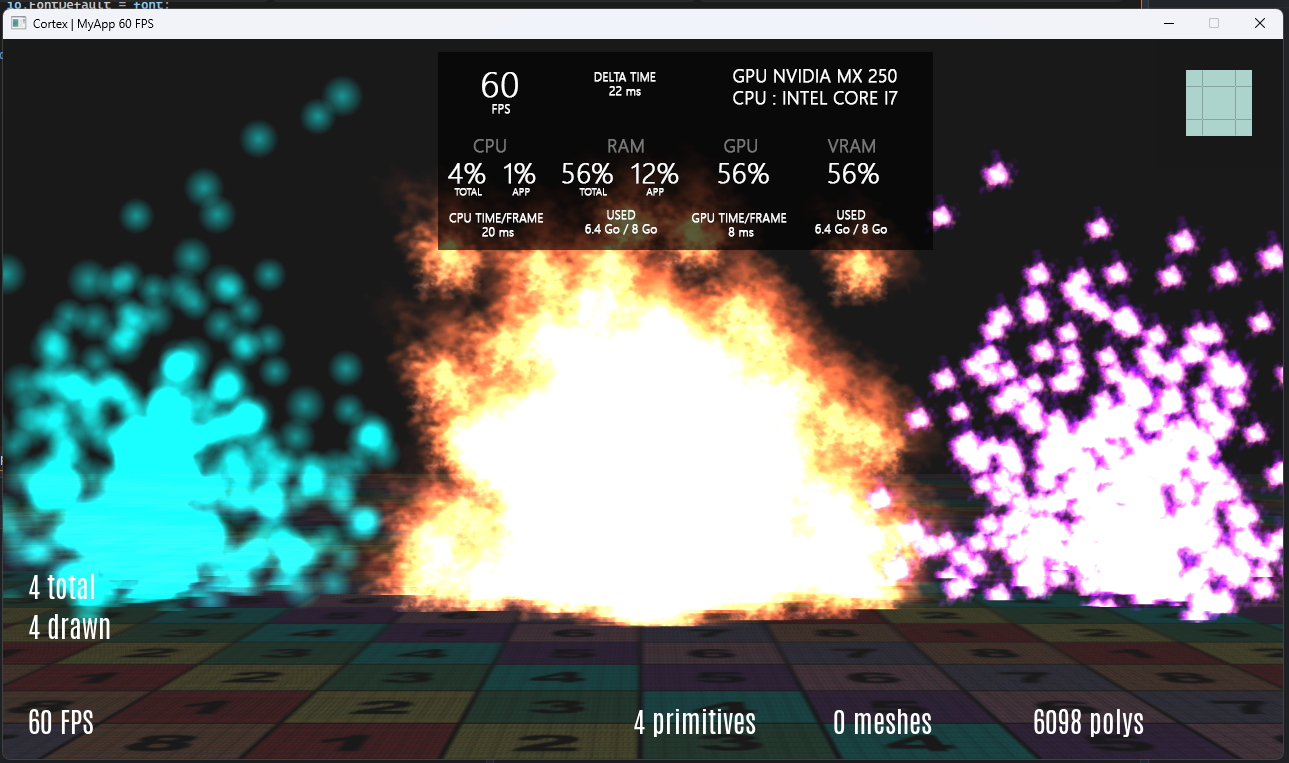
<style>
.page{position:relative;width:1289px;height:763px;background:#191919}
.page>*{position:absolute;margin:0}
.t1{font:36px "SegoeUI-Light";color:#ffffff;font-weight:bold}
.t2{font:12px "SegoeUI-Light";color:#ffffff;font-weight:bold}
.t3{font:18px "SegoeUI-Light";color:#ffffff;font-weight:bold}
.t4{font:18px "SegoeUI-Light";color:#787878;font-weight:bold}
.t5{font:28px "SegoeUI-Light";color:#ffffff;font-weight:bold}
.t6{font:10px "SegoeUI-Light";color:#ffffff;font-weight:bold}
</style>
<div class="page">
<p class="t1" style="left:482px;top:72px;width:36px;height:26px">60</p>
<p class="t2" style="left:594px;top:72px;width:62px;height:24px;text-align:center">DELTA TIME<br>22 ms</p>
<p class="t3" style="left:733px;top:69px;width:165px;height:36px">GPU NVIDIA MX 250<br>CPU : INTEL CORE I7</p>
<p class="t2" style="left:492px;top:104px;width:18px;height:10px">FPS</p>
<p class="t4" style="left:473px;top:139px;width:33px;height:14px">CPU</p>
<p class="t4" style="left:608px;top:139px;width:36px;height:14px">RAM</p>
<p class="t4" style="left:724px;top:139px;width:33px;height:14px">GPU</p>
<p class="t4" style="left:827px;top:139px;width:48px;height:14px">VRAM</p>
<p class="t5" style="left:448px;top:163px;width:88px;height:21px">4%  1%</p>
<p class="t5" style="left:562px;top:163px;width:117px;height:21px">56%  12%</p>
<p class="t5" style="left:718px;top:163px;width:51px;height:21px">56%</p>
<p class="t5" style="left:828px;top:163px;width:51px;height:21px">56%</p>
<p class="t6" style="left:454px;top:188px;width:76px;height:8px">TOTAL          APP</p>
<p class="t6" style="left:579px;top:188px;width:85px;height:8px">TOTAL             APP</p>
<p class="t2" style="left:449px;top:213px;width:94px;height:24px;text-align:center">CPU TIME/FRAME <br>20 ms</p>
<p class="t2" style="left:585px;top:210px;width:72px;height:25px;text-align:center">USED<br>6.4 Go / 8 Go</p>
<p class="t2" style="left:692px;top:213px;width:95px;height:24px;text-align:center">GPU TIME/FRAME <br>8 ms</p>
<p class="t2" style="left:815px;top:210px;width:72px;height:25px;text-align:center">USED<br>6.4 Go / 8 Go</p>
</div>
